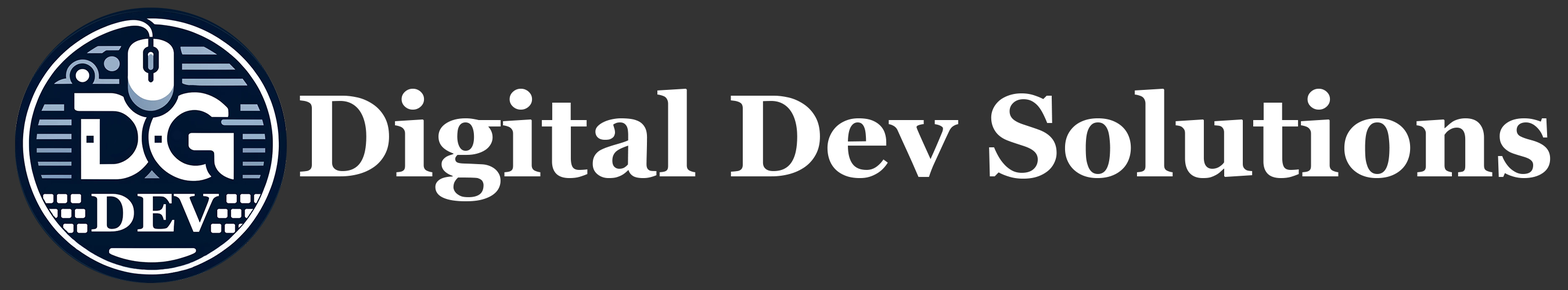
<style>
.page{position:relative;width:1568px;height:290px;background:#333333}
.page>*{position:absolute;margin:0}
.t1{font:116.1px "Georgia-Bold";color:#ffffff}
</style>
<div class="page">
<p class="t1" style="left:300px;top:89px;width:1251px;height:113px">Digital Dev Solutions</p>
</div>
